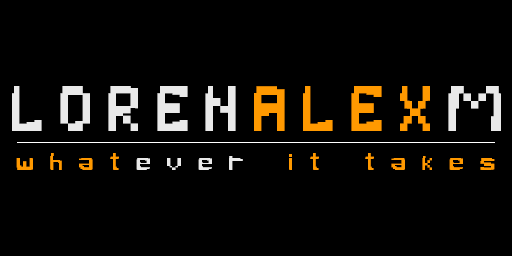
<style>
.page{position:relative;width:512px;height:256px;background:#000000}
.page>*{position:absolute;margin:0}
.t1{font:64px "PixelBug";letter-spacing:0.25em;color:#e9e9e9}
.t2{font:64px "PixelBug";letter-spacing:0.25em;color:#ff9900}
.t3{font:24px "PixelBug";letter-spacing:0.69em;color:#ff9900}
.t4{font:24px "PixelBug";letter-spacing:0.69em;color:#e9e9e9}
</style>
<div class="page">
<p class="t1" style="left:12px;top:86px;width:489px;height:45px">LOREN<span class="t2">ALEX</span>M</p>
<p class="t3" style="left:16px;top:153px;width:479px;height:17px">what<span class="t4">ever</span> it takes</p>
</div>
